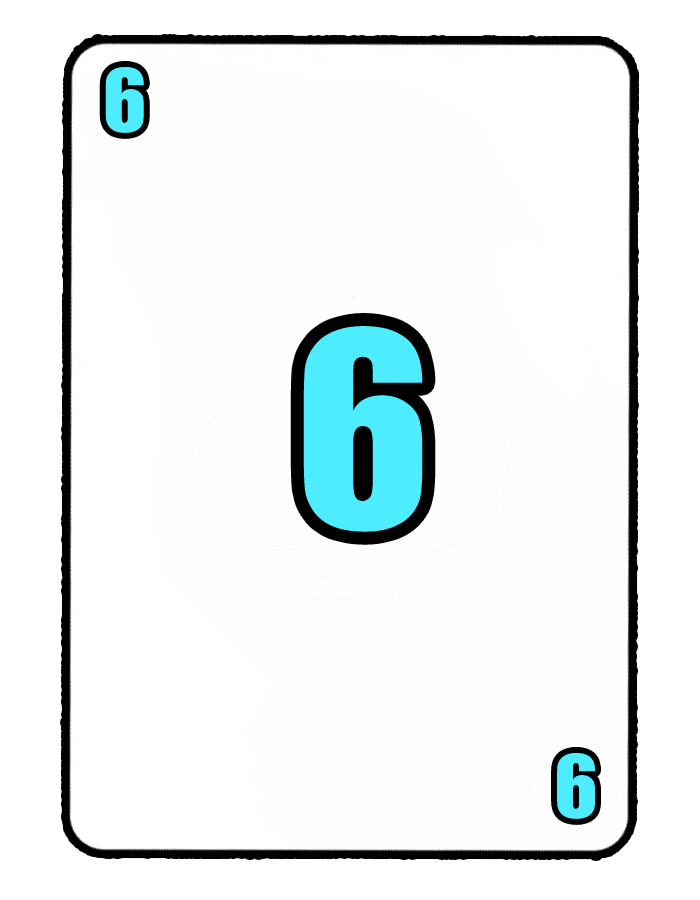
<style>
.page{position:relative;width:700px;height:900px;background:#fefefe}
.page>*{position:absolute;margin:0}
.t1{font:80px "Impact";color:#4decff}
.t2{font:250px "Impact";color:#4decff}
</style>
<div class="page">
<p class="t1" style="left:105px;top:67px;width:39px;height:66px">6</p>
<p class="t2" style="left:303px;top:326px;width:120px;height:206px">6</p>
<p class="t1" style="left:557px;top:753px;width:38px;height:66px">64</p>
</div>
